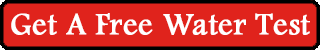
<style>
.page{position:relative;width:320px;height:50px;background:#e0231c}
.page>*{position:absolute;margin:0}
.t1{font:32px "FootlightMTLight";color:#ffffff;font-weight:bold}
</style>
<div class="page">
<p class="t1" style="left:11px;top:13px;width:299px;height:22px">Get A Free Water Test</p>
</div>
